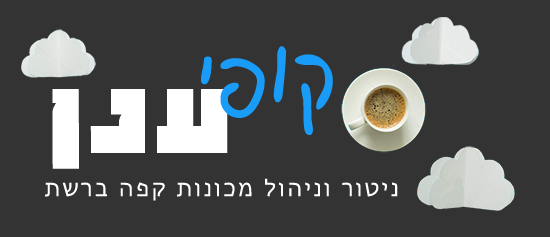
<style>
.page{position:relative;width:550px;height:237px;background:#333333}
.page>*{position:absolute;margin:0}
.t1{font:99.6px "Cafe";letter-spacing:0.05em;color:#189cf8}
.t2{font:99.6px "MigdalHaemeq";letter-spacing:0.1em;color:#ffffff}
.t3{font:23.7px "Gisha";letter-spacing:0.1em;color:#ffffff}
</style>
<div class="page">
<p class="t1" style="left:201px;top:46px;width:132px;height:89px">יפוק</p>
<p class="t2" style="left:52px;top:89px;width:176px;height:80px">ןנע</p>
<p class="t3" style="left:45px;top:178px;width:353px;height:23px">תשרב הפק תונוכמ לוהינו רוטינ</p>
</div>
